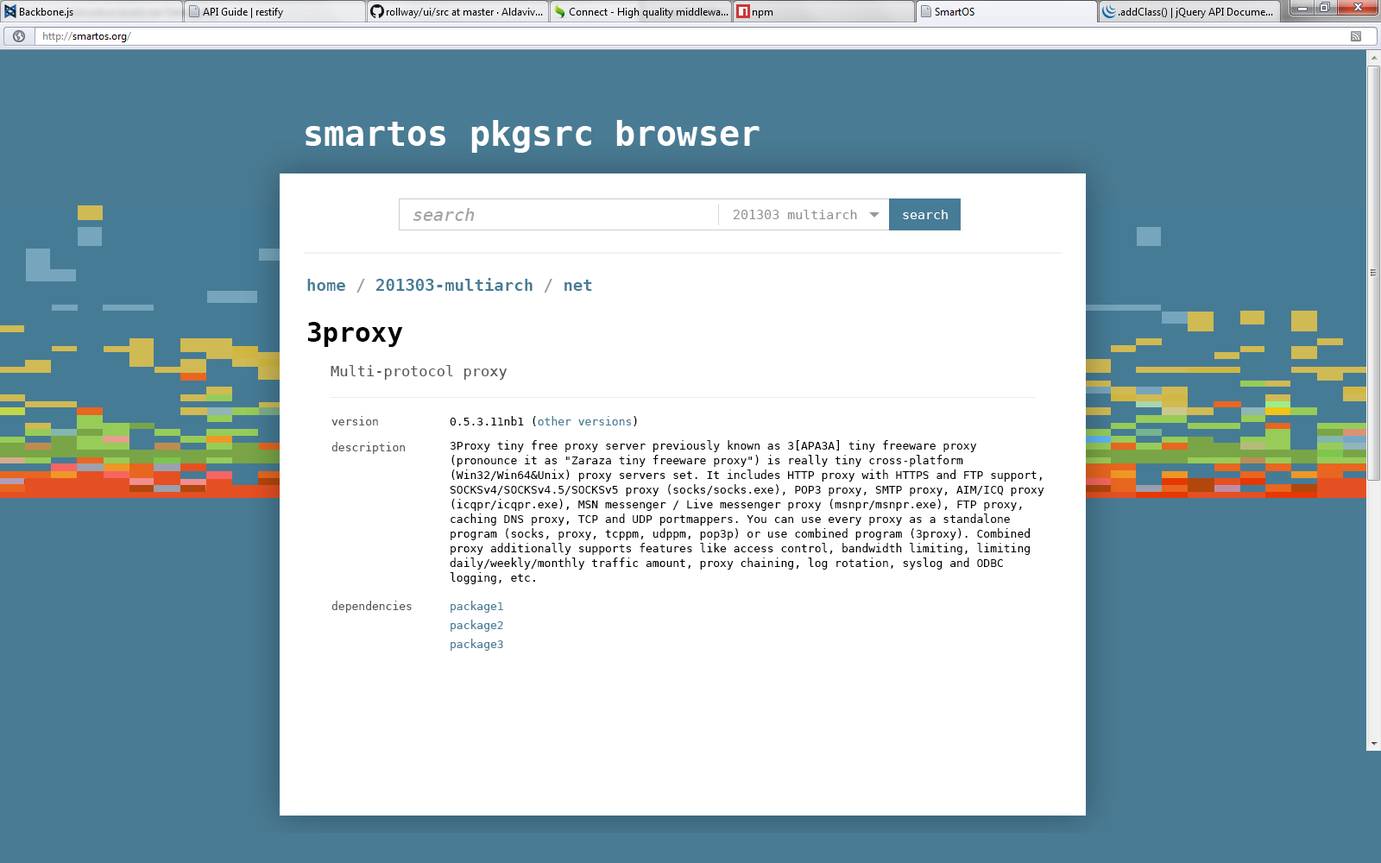
<style>
.page{position:relative;width:1381px;height:863px;background:#ffffff}
.page>*{position:absolute;margin:0}
.t1{font:34.5px "DejaVuSansMono-Bold";color:#ffffff}
.t2{font:17.3px "DejaVuSansMono-Oblique";color:#a3a3a3}
.t3{font:12.9px "DejaVuSansMono";color:#8d8d8d}
.t4{font:12.9px "DejaVuSansMono";color:#ffffff}
.t5{font:16.4px "DejaVuSansMono-Bold";color:#477c96}
.t6{font:16.4px "DejaVuSansMono-Bold";color:#999999}
.t7{font:26.8px "DejaVuSansMono-Bold";color:#000000}
.t8{font:14.7px "DejaVuSansMono";color:#595959}
.t9{font:11.2px "DejaVuSansMono";color:#595959}
.t10{font:11.2px "DejaVuSansMono";color:#477c96}
.t11{font:11.2px "DejaVuSansMono";color:#000000}
.t12{font:11.2px/14.7px "DejaVuSansMono";color:#000000}
.t13{font:11.2px/19px "DejaVuSansMono";color:#477c96}
</style>
<div class="page">
<p class="t1" style="left:306px;top:120px;width:454px;height:33px">smartos pkgsrc browser</p>
<p class="t2" style="left:414px;top:208px;width:61px;height:13px">search</p>
<p class="t3" style="left:733px;top:210px;width:124px;height:9px">201303 multiarch</p>
<p class="t4" style="left:903px;top:210px;width:45px;height:9px">search</p>
<p class="t5" style="left:307px;top:278px;width:285px;height:15px">home <span class="t6">/ </span>201303-multiarch <span class="t6">/ </span>net</p>
<p class="t7" style="left:307px;top:322px;width:96px;height:25px">3proxy</p>
<p class="t8" style="left:331px;top:365px;width:176px;height:15px">Multi-protocol proxy</p>
<p class="t9" style="left:332px;top:416px;width:46px;height:10px">version</p>
<p class="t10" style="left:450px;top:416px;width:187px;height:10px"><span class="t11">0.5.3.11nb1 (</span>other versions<span class="t11">)</span></p>
<p class="t9" style="left:332px;top:442px;width:73px;height:12px">description</p>
<p class="t12" style="left:450px;top:440px;width:595px;height:144px">3Proxy tiny free proxy server previously known as 3[APA3A] tiny freeware proxy (pronounce it as "Zaraza tiny freeware proxy") is really tiny cross-platform (Win32/Win64&amp;Unix) proxy servers set. It includes HTTP proxy with HTTPS and FTP support, SOCKSv4/SOCKSv4.5/SOCKSv5 proxy (socks/socks.exe), POP3 proxy, SMTP proxy, AIM/ICQ proxy (icqpr/icqpr.exe), MSN messenger / Live messenger proxy (msnpr/msnpr.exe), FTP proxy, caching DNS proxy, TCP and UDP portmappers. You can use every proxy as a standalone program (socks, proxy, tcppm, udppm, pop3p) or use combined program (3proxy). Combined proxy additionally supports features like access control, bandwidth limiting, limiting daily/weekly/monthly traffic amount, proxy chaining, log rotation, syslog and ODBC logging, etc.</p>
<p class="t9" style="left:332px;top:601px;width:80px;height:12px">dependencies</p>
<p class="t13" style="left:451px;top:601px;width:52px;height:50px">package1<br>package2<br>package3</p>
</div>
